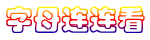
<style>
.page{position:relative;width:150px;height:40px;background:#ffffff}
.page>*{position:absolute;margin:0}
.t1{font:28px "STCaiyun"}
</style>
<div class="page">
<p class="t1" style="left:6px;top:6px;width:139px;height:27px">字母连连看</p>
</div>
